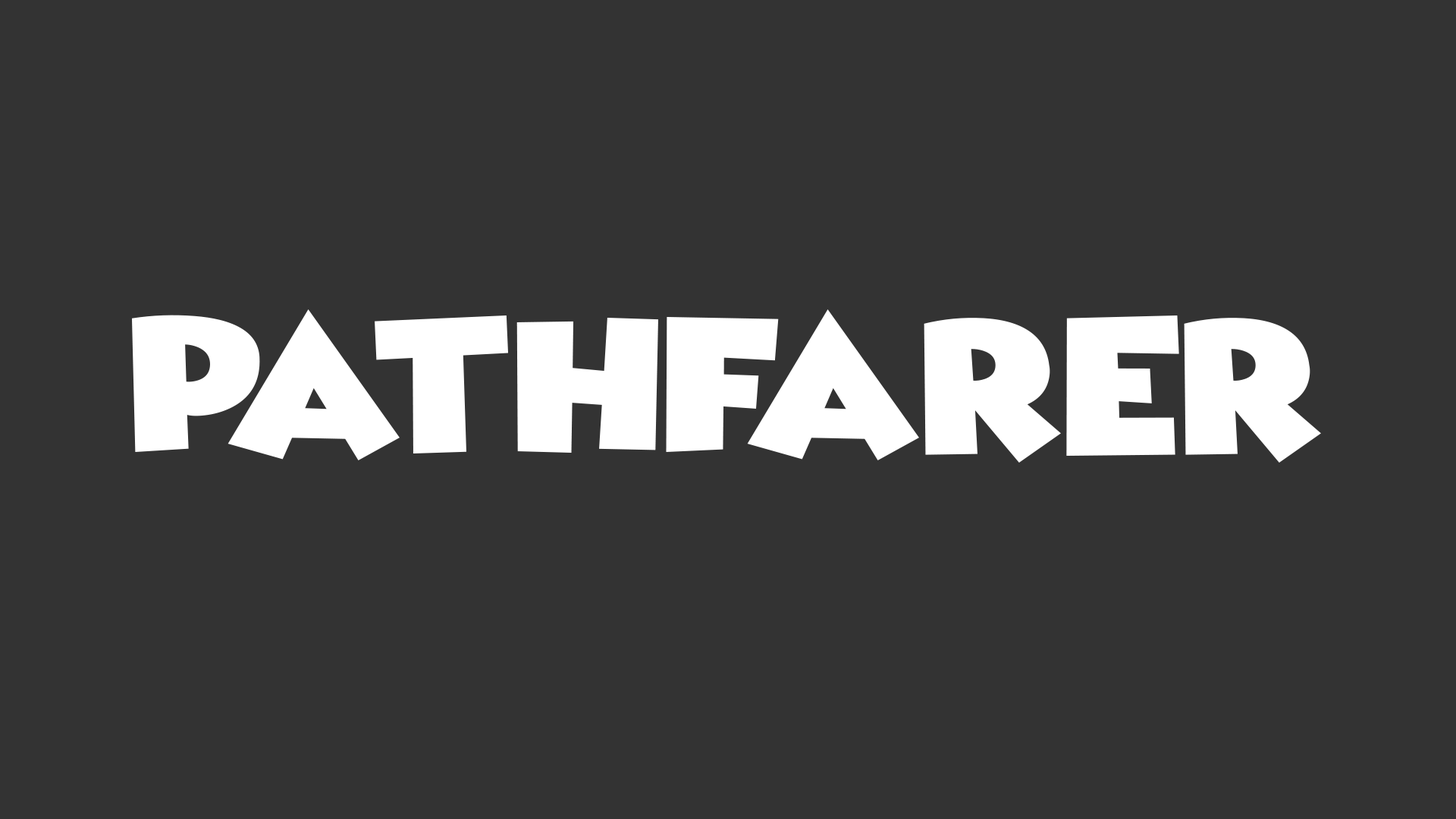
<style>
.page{position:relative;width:1456px;height:819px;background:#333333}
.page>*{position:absolute;margin:0}
.t1{font:161.1px "WickedMouse";color:#ffffff;scale:1.18 1}
</style>
<div class="page">
<p class="t1" style="left:132px;top:309px;width:1189px;height:154px">Pathfarer</p>
</div>
